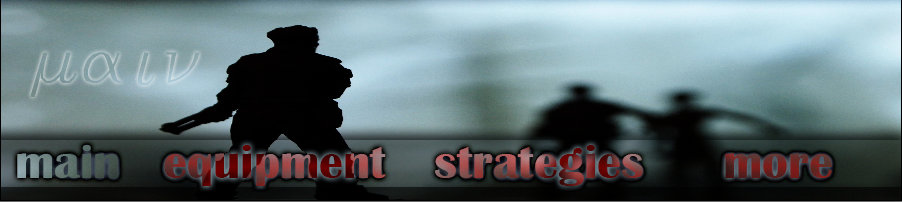
<style>
.page{position:relative;width:902px;height:202px}
.page>*{position:absolute;margin:0}
.t1{font:48px "BritannicBold"}
.t2{font:48px "BritannicBold";color:#6a221e}
</style>
<div class="page">
<p class="t1" style="left:17px;top:145px;width:101px;height:33px">main</p>
<p class="t1" style="left:164px;top:145px;width:222px;height:41px">equipment</p>
<p class="t1" style="left:435px;top:145px;width:208px;height:41px">strategies</p>
<p class="t2" style="left:725px;top:153px;width:107px;height:25px">more</p>
</div>
